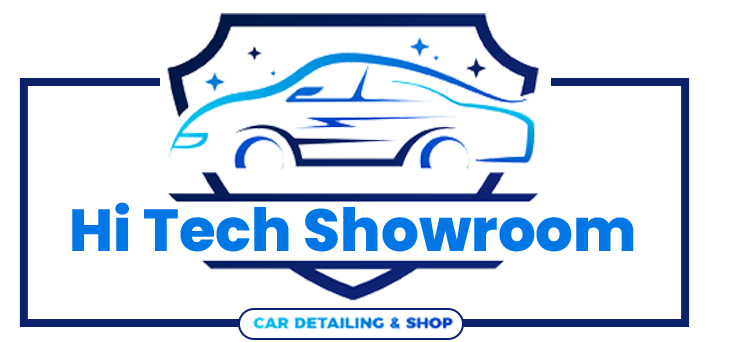
<style>
.page{position:relative;width:729px;height:342px;background:#ffffff}
.page>*{position:absolute;margin:0}
.t1{font:59.3px "Poppins-ExtraBold";color:#0177e5}
</style>
<div class="page">
<p class="t1" style="left:72px;top:202px;width:562px;height:50px">Hi Tech Showroom</p>
</div>
